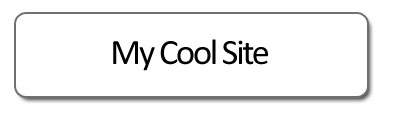
<style>
.page{position:relative;width:395px;height:116px;background:#ffffff}
.page>*{position:absolute;margin:0}
.t1{font:36px "Calibri";letter-spacing:-0.06em;color:#000000}
</style>
<div class="page">
<p class="t1" style="left:113px;top:39px;width:155px;height:32px">My Cool Site</p>
</div>
